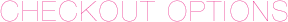
<style>
.page{position:relative;width:288px;height:22px;background:#ffffff}
.page>*{position:absolute;margin:0}
.t1{font:28px "HelveticaNeueLTPro-UltLt";letter-spacing:0.075em}
</style>
<div class="page">
<p class="t1" style="left:0px;top:0px;width:288px;height:22px">CHECKOUT OPTIONS</p>
</div>
